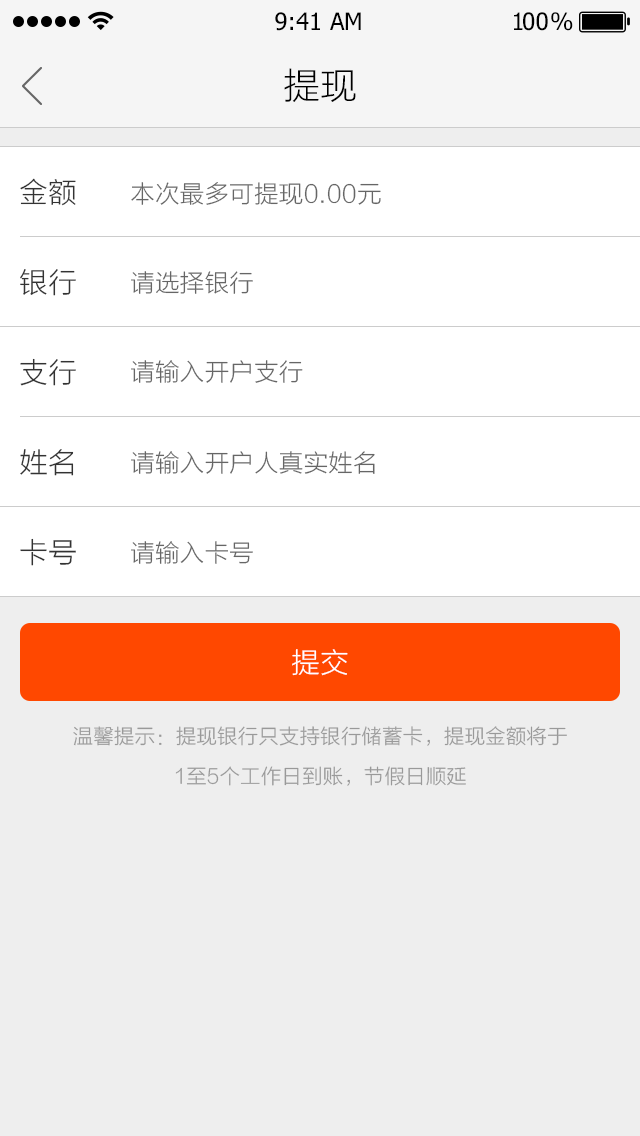
<style>
.page{position:relative;width:640px;height:1136px;background:#eeeeee}
.page>*{position:absolute;margin:0}
.t1{font:24px "Tahoma";color:#000000}
.t2{font:24px "Tahoma";letter-spacing:-0.1em;color:#000000}
.t3{font:24px "Tahoma";letter-spacing:-0.25em;color:#000000}
.t4{font:36px "STHeitiSC-Light";color:#000000}
.t5{font:28px "STHeitiSC-Light";color:#333333}
.t6{font:24px "STHeitiSC-Light";color:#666666}
.t7{font:28px "STHeitiSC-Light";color:#ffffff}
.t8{font:20px/40px "STHeitiSC-Light";color:#999999}
</style>
<div class="page">
<p class="t1" style="left:275px;top:12px;width:86px;height:19px">9:41 AM</p>
<p class="t2" style="left:514px;top:12px;width:59px;height:19px">1<span class="t1">0</span><span class="t3">0 </span>%</p>
<p class="t4" style="left:284px;top:68px;width:72px;height:34px">提现</p>
<p class="t5" style="left:20px;top:178px;width:56px;height:28px">金额</p>
<p class="t6" style="left:131px;top:182px;width:250px;height:23px">本次最多可提现0.00元</p>
<p class="t5" style="left:20px;top:269px;width:56px;height:27px">银行</p>
<p class="t6" style="left:131px;top:271px;width:122px;height:23px">请选择银行</p>
<p class="t5" style="left:20px;top:358px;width:56px;height:28px">支行</p>
<p class="t6" style="left:131px;top:360px;width:172px;height:23px">请输入开户支行</p>
<p class="t5" style="left:20px;top:449px;width:54px;height:27px">姓名</p>
<p class="t6" style="left:131px;top:451px;width:244px;height:23px">请输入开户人真实姓名</p>
<p class="t5" style="left:20px;top:538px;width:56px;height:28px">卡号</p>
<p class="t6" style="left:131px;top:541px;width:122px;height:23px">请输入卡号</p>
<p class="t7" style="left:292px;top:649px;width:56px;height:27px">提交</p>
<p class="t8" style="left:73px;top:726px;width:494px;height:60px;text-align:center">温馨提示：提现银行只支持银行储蓄卡，提现金额将于<br>1至5个工作日到账，节假日顺延</p>
</div>
